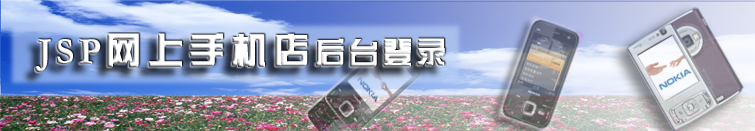
<style>
.page{position:relative;width:755px;height:131px}
.page>*{position:absolute;margin:0}
.t1{font:36px "BDZYJT--GB1-0";letter-spacing:0.14em;color:#ffffff;font-weight:bold}
.t2{font:36px "Garamond-Bold";letter-spacing:0.1em;color:#ffffff;font-weight:bold}
.t3{font:30px "BDZYJT--GB1-0";letter-spacing:0.1em;color:#ffffff;font-weight:bold}
</style>
<div class="page">
<p class="t1" style="left:35px;top:33px;width:411px;height:39px"><span class="t2">JSP</span>网上手机店<span class="t3">后台登录</span></p>
</div>
